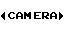
<style>
.page{position:relative;width:64px;height:32px;background:#ffffff}
.page>*{position:absolute;margin:0}
.t1{font:14px "ArcadeClassic";color:#000000;scale:1.05 1}
</style>
<div class="page">
<p class="t1" style="left:8px;top:12px;width:49px;height:7px">CAM ERA</p>
</div>
